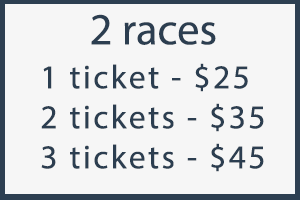
<style>
.page{position:relative;width:300px;height:200px;background:#f6f6f6}
.page>*{position:absolute;margin:0}
.t1{font:44.4px "MyriadPro-Regular";color:#2c3e50}
.t2{font:33.3px "MyriadPro-Regular";letter-spacing:0.075em;color:#2c3e50}
</style>
<div class="page">
<p class="t1" style="left:91px;top:14px;width:125px;height:31px">2 races</p>
<p class="t2" style="left:41px;top:63px;width:223px;height:109px">1 ticket - $25<br>2 tickets - $35<br>3 tickets - $45</p>
</div>
